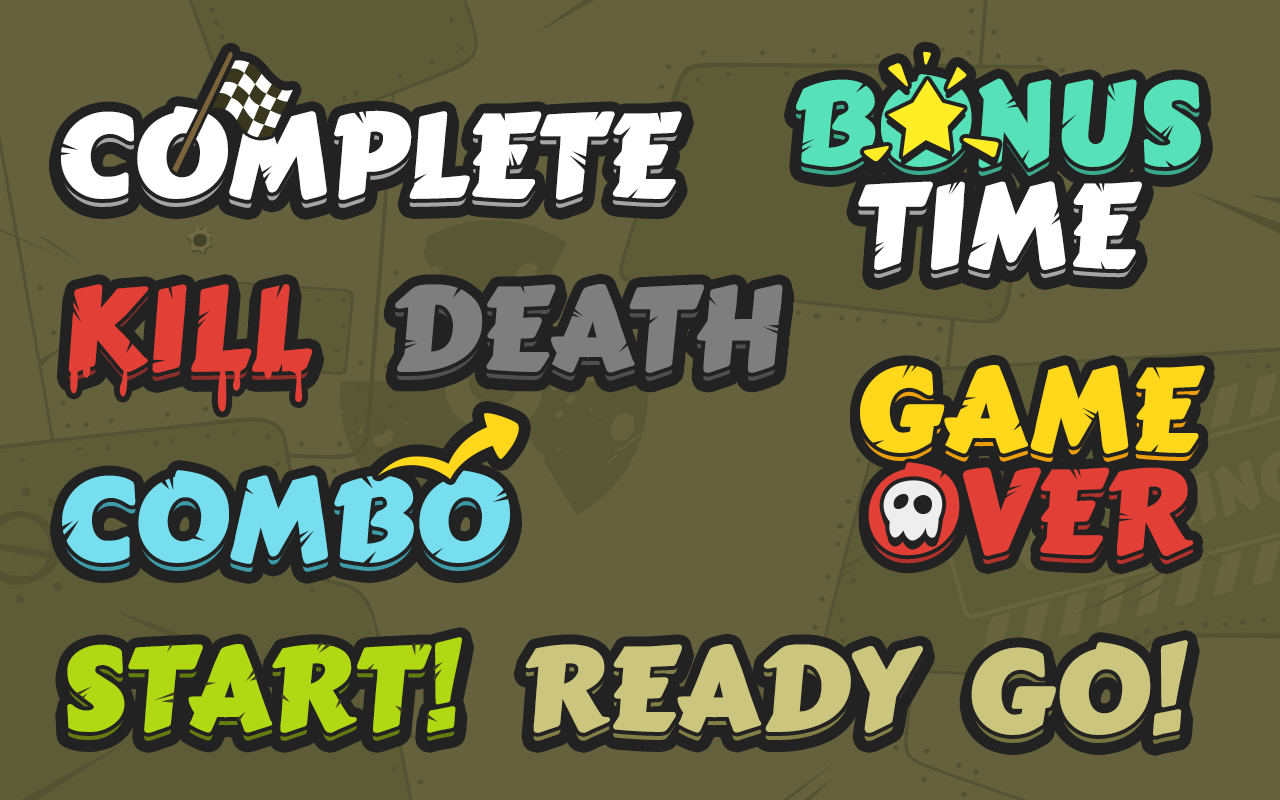
<style>
.page{position:relative;width:1280px;height:800px;background:#64613c}
.page>*{position:absolute;margin:0}
.t1{font:113.1px/102.2px "CarterOne";letter-spacing:-0.01em;color:#56e1b8;text-transform:uppercase;font-weight:bold;scale:1.05 1}
.t2{font:113.1px/102.2px "CarterOne";letter-spacing:-0.01em;color:#ffffff;text-transform:uppercase;font-weight:bold;scale:1.05 1}
.t3{font:113.1px/102.2px "CarterOne";letter-spacing:-0.01em;text-transform:uppercase;font-weight:bold;scale:1.05 1}
.t4{font:113.1px "CarterOne";letter-spacing:-0.01em;color:#ffffff;text-transform:uppercase;font-weight:bold;scale:1.05 1}
.t5{font:113.1px "CarterOne";letter-spacing:-0.01em;color:#e23f36;text-transform:uppercase;font-weight:bold;scale:1.05 1}
.t6{font:113.1px "CarterOne";letter-spacing:-0.01em;color:#7e7e7e;text-transform:uppercase;font-weight:bold;scale:1.05 1}
.t7{font:113.1px/102.2px "CarterOne";letter-spacing:-0.01em;color:#ffd81c;text-transform:uppercase;font-weight:bold;scale:1.05 1}
.t8{font:113.1px/102.2px "CarterOne";letter-spacing:-0.01em;color:#e23f36;text-transform:uppercase;font-weight:bold;scale:1.05 1}
.t9{font:113.1px "CarterOne";letter-spacing:-0.01em;color:#76deee;text-transform:uppercase;font-weight:bold;scale:1.05 1}
.t10{font:113.1px "CarterOne";letter-spacing:-0.01em;color:#b1d913;text-transform:uppercase;font-weight:bold;scale:1.05 1}
.t11{font:113.1px "CarterOne";letter-spacing:-0.01em;color:#cbc57d;text-transform:uppercase;font-weight:bold;scale:1.05 1}
</style>
<div class="page">
<p class="t1" style="left:796px;top:74px;width:405px;height:196px;text-align:center">BONUS<br><span class="t2">TIME</span></p>
<p class="t3" style="left:796px;top:82px;width:405px;height:196px;text-align:center">BONUS<br>TIME</p>
<p class="t4" style="left:61px;top:106px;width:621px;height:94px">COMPLETE</p>
<p class="t4" style="left:61px;top:114px;width:621px;height:94px">COMPLETE</p>
<p class="t5" style="left:68px;top:292px;width:245px;height:89px">KILL</p>
<p class="t5" style="left:68px;top:284px;width:245px;height:89px">KILL</p>
<p class="t6" style="left:395px;top:292px;width:388px;height:89px">DEATH</p>
<p class="t6" style="left:395px;top:284px;width:388px;height:89px">DEATH</p>
<p class="t7" style="left:860px;top:365px;width:345px;height:191px;text-align:center">GAME<br><span class="t8">OVER</span></p>
<p class="t3" style="left:860px;top:373px;width:345px;height:191px;text-align:center">GAME<br>OVER</p>
<p class="t9" style="left:62px;top:470px;width:448px;height:94px">COMBO</p>
<p class="t9" style="left:62px;top:478px;width:448px;height:94px">COMBO</p>
<p class="t10" style="left:67px;top:637px;width:395px;height:96px">start!</p>
<p class="t11" style="left:971px;top:640px;width:217px;height:96px">GO!</p>
<p class="t10" style="left:67px;top:645px;width:395px;height:96px">start!</p>
<p class="t11" style="left:525px;top:652px;width:398px;height:89px">READY</p>
<p class="t11" style="left:525px;top:644px;width:398px;height:89px">READY</p>
<p class="t11" style="left:971px;top:648px;width:217px;height:96px">GO!</p>
</div>
